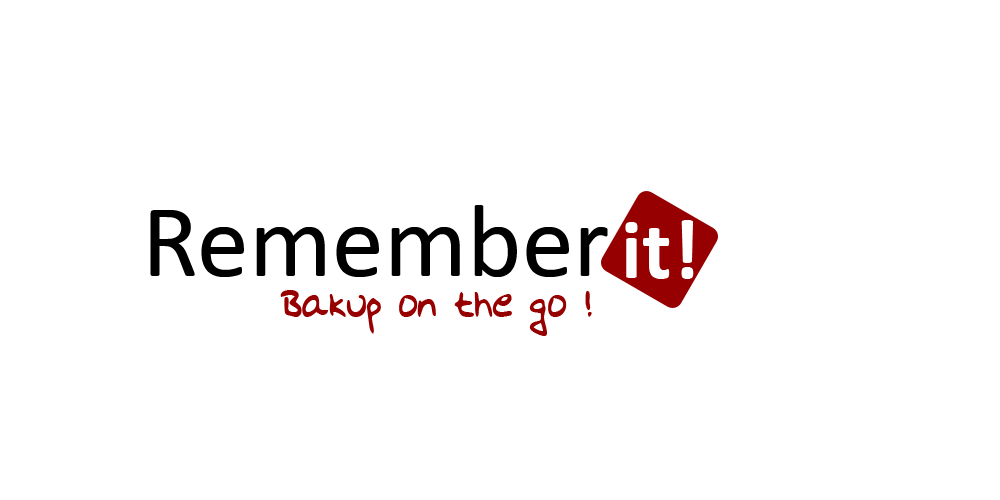
<style>
.page{position:relative;width:1000px;height:500px;background:#ffffff}
.page>*{position:absolute;margin:0}
.t1{font:104.2px "Calibri";color:#000000}
.t2{font:85.5px "Calibri-Bold";color:#ffffff}
.t3{font:41.7px "HodgesHand-Plain";color:#960000}
</style>
<div class="page">
<p class="t1" style="left:150px;top:205px;width:458px;height:72px">Remember</p>
<p class="t2" style="left:625px;top:220px;width:69px;height:59px">it!</p>
<p class="t3" style="left:280px;top:290px;width:312px;height:46px">Bakup on the go !</p>
</div>
